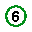
<style>
.page{position:relative;width:32px;height:32px;background:#ffffff}
.page>*{position:absolute;margin:0}
.t1{font:14px "Arial-BoldMT";color:#000000}
</style>
<div class="page">
<p class="t1" style="left:12px;top:11px;width:7px;height:11px">6</p>
</div>
